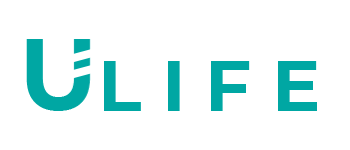
<style>
.page{position:relative;width:350px;height:150px;background:#ffffff}
.page>*{position:absolute;margin:0}
.t1{font:72px "Montserrat-Bold";letter-spacing:0.28em;color:#00a7a3;text-transform:uppercase}
</style>
<div class="page">
<p class="t1" style="left:104px;top:61px;width:213px;height:50px">LIFE</p>
</div>
